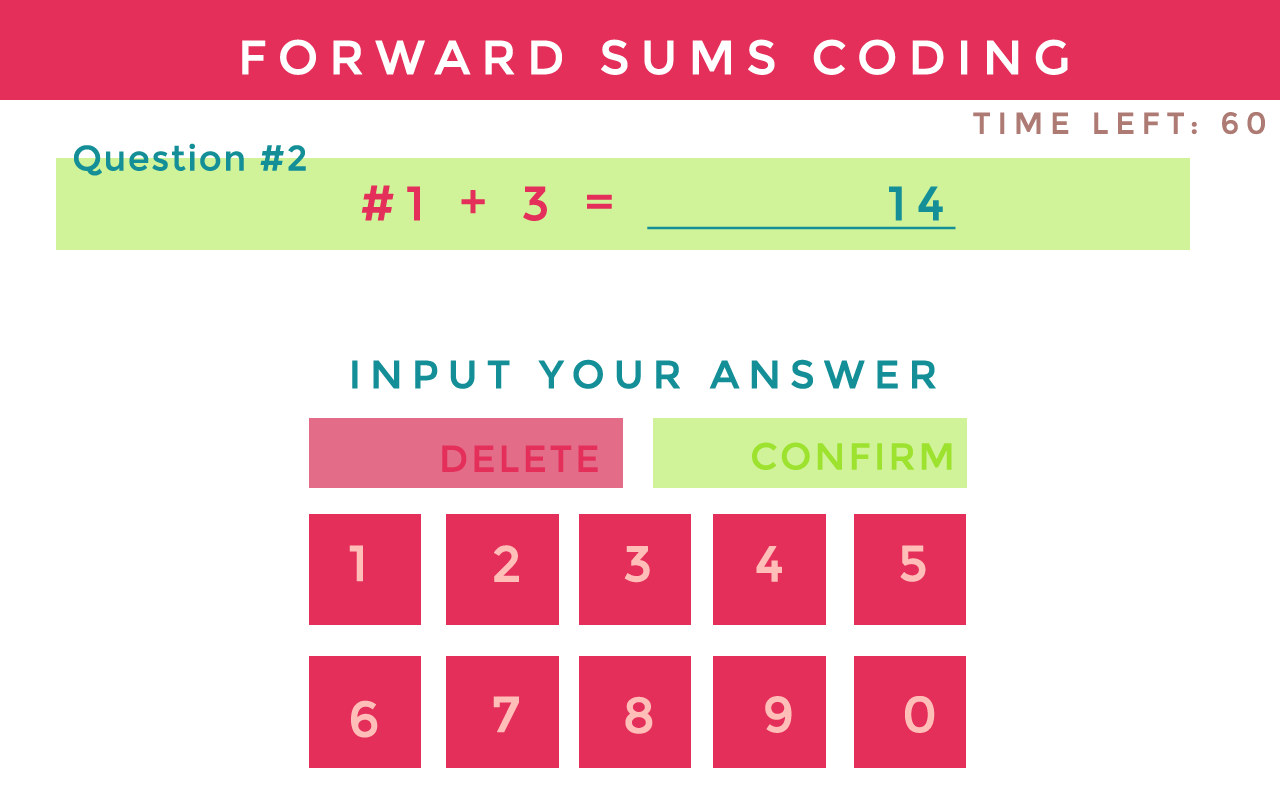
<style>
.page{position:relative;width:1280px;height:800px;background:#ffffff}
.page>*{position:absolute;margin:0}
.t1{font:48px "Montserrat-Regular";letter-spacing:0.2em;color:#ffffff;text-transform:uppercase;font-weight:bold}
.t2{font:30px "Montserrat-Regular";letter-spacing:0.2em;color:#ad7a74;text-transform:uppercase;font-weight:bold}
.t3{font:35px "Montserrat-Regular";letter-spacing:0.025em;color:#148f97;font-weight:bold}
.t4{font:48px "Montserrat-Regular";letter-spacing:0.2em;color:#e42f5a;font-weight:bold}
.t5{font:48px "Montserrat-Regular";letter-spacing:0.2em;color:#148f97;font-weight:bold;text-decoration:underline}
.t6{font:39.3px "Montserrat-Regular";letter-spacing:0.2em;color:#148f97;text-transform:uppercase;font-weight:bold}
.t7{font:37.3px "Montserrat-Regular";letter-spacing:0.05em;color:#e42f5a;text-transform:uppercase;font-weight:bold}
.t8{font:37.3px "Montserrat-Regular";letter-spacing:0.05em;color:#9de22f;text-transform:uppercase;font-weight:bold}
.t9{font:50.3px "Montserrat-Regular";letter-spacing:0.2em;color:#ffbfb8;text-transform:uppercase;font-weight:bold}
</style>
<div class="page">
<p class="t1" style="left:242px;top:39px;width:826px;height:36px">Forward Sums Coding</p>
<p class="t2" style="left:973px;top:112px;width:292px;height:23px">Time Left: 60</p>
<p class="t3" style="left:74px;top:143px;width:232px;height:33px">Question #2</p>
<p class="t4" style="left:361px;top:185px;width:251px;height:36px">#1 + 3 =</p>
<p class="t5" style="left:647px;top:186px;width:309px;height:44px">14</p>
<p class="t6" style="left:352px;top:359px;width:584px;height:30px">Input your Answer</p>
<p class="t7" style="left:442px;top:445px;width:156px;height:27px">Delete</p>
<p class="t8" style="left:752px;top:442px;width:200px;height:28px">Confirm</p>
<p class="t9" style="left:349px;top:545px;width:14px;height:37px">1</p>
<p class="t9" style="left:494px;top:545px;width:25px;height:37px">2</p>
<p class="t9" style="left:900px;top:545px;width:26px;height:37px">5</p>
<p class="t9" style="left:624px;top:546px;width:26px;height:37px">3</p>
<p class="t9" style="left:756px;top:546px;width:26px;height:36px">4</p>
<p class="t9" style="left:351px;top:700px;width:27px;height:38px">6</p>
<p class="t9" style="left:493px;top:696px;width:26px;height:37px">7</p>
<p class="t9" style="left:625px;top:696px;width:28px;height:38px">8</p>
<p class="t9" style="left:765px;top:696px;width:27px;height:37px">9</p>
<p class="t9" style="left:905px;top:696px;width:30px;height:37px">0</p>
</div>
